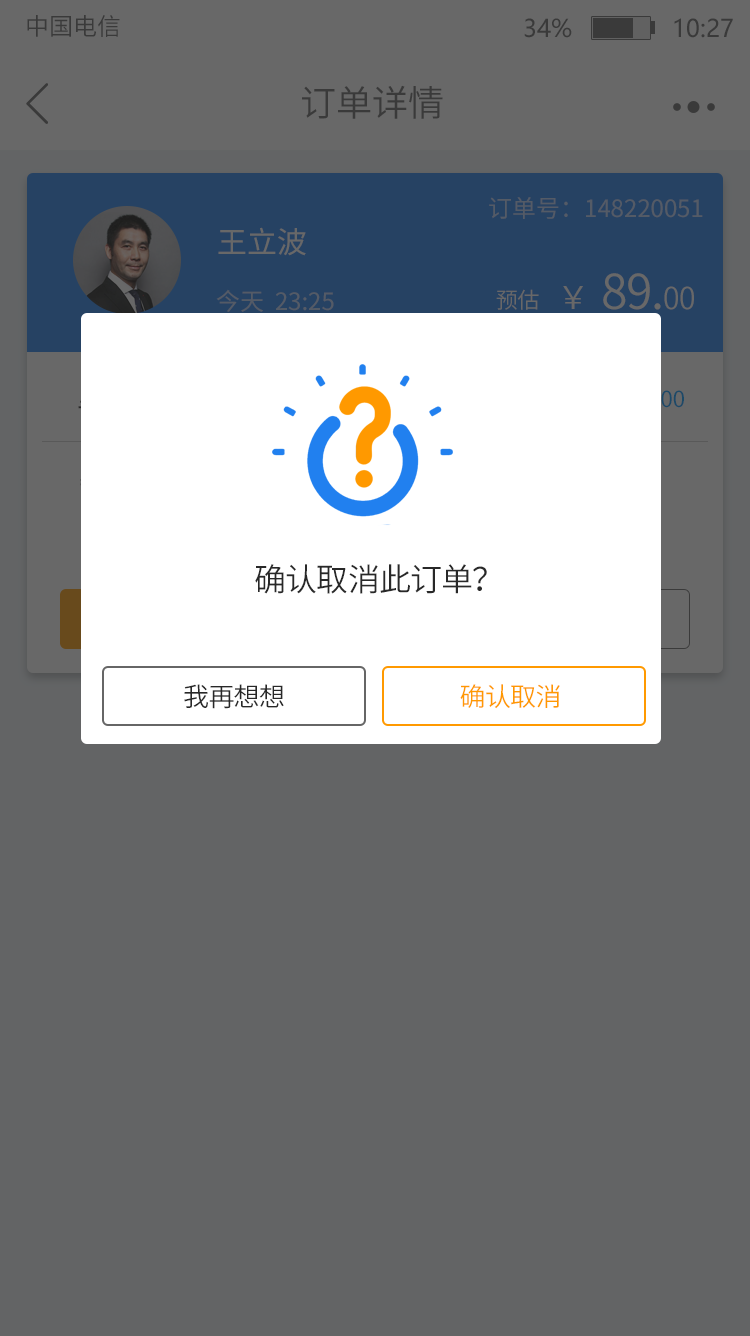
<style>
.page{position:relative;width:750px;height:1336px;background:#636465}
.page>*{position:absolute;margin:0}
.t1{font:24px "SourceHanSansCN-Normal";color:#282828}
.t2{font:24px "MicrosoftYaHei";color:#3a3a3a}
.t3{font:36px "SourceHanSansCN-Normal";color:#3a3a3a}
.t4{font:24px "SourceHanSansCN-Regular";color:#545b66}
.t5{font:30px "SourceHanSansCN-Regular";color:#686868}
.t6{font:48.2px "SourceHanSansCN-Normal";letter-spacing:-0.025em;color:#686868}
.t7{font:32.2px "SourceHanSansCN-Normal";letter-spacing:-0.025em;color:#686868}
.t8{font:30px "SourceHanSansCN-Normal";letter-spacing:-0.025em;color:#686868}
.t9{font:22px "SourceHanSansCN-Normal";letter-spacing:-0.025em;color:#686868}
.t10{font:32px "SourceHanSansCN-Normal";letter-spacing:-0.025em;color:#282828}
.t11{font:26px "SourceHanSansCN-Normal";letter-spacing:-0.025em;color:#282828}
.t12{font:26px "SourceHanSansCN-Normal";letter-spacing:-0.025em;color:#ff9900}
</style>
<div class="page">
<p class="t1" style="left:27px;top:15px;width:93px;height:22px">中国电信</p>
<p class="t2" style="left:524px;top:18px;width:209px;height:20px">34%              10:27</p>
<p class="t3" style="left:302px;top:85px;width:141px;height:34px">订单详情</p>
<p class="t4" style="left:489px;top:197px;width:214px;height:22px">订单号：148220051</p>
<p class="t5" style="left:218px;top:227px;width:88px;height:29px">王立波</p>
<p class="t6" style="left:563px;top:273px;width:131px;height:37px"><span class="t7">￥  </span>89.<span class="t8">00</span></p>
<p class="t4" style="left:216px;top:289px;width:118px;height:23px">今天  23:25</p>
<p class="t9" style="left:496px;top:289px;width:43px;height:21px">预估</p>
<p class="t10" style="left:255px;top:564px;width:232px;height:30px">确认取消此订单？</p>
<p class="t11" style="left:184px;top:684px;width:376px;height:25px">我再想想                                  <span class="t12">确认取消</span></p>
</div>
